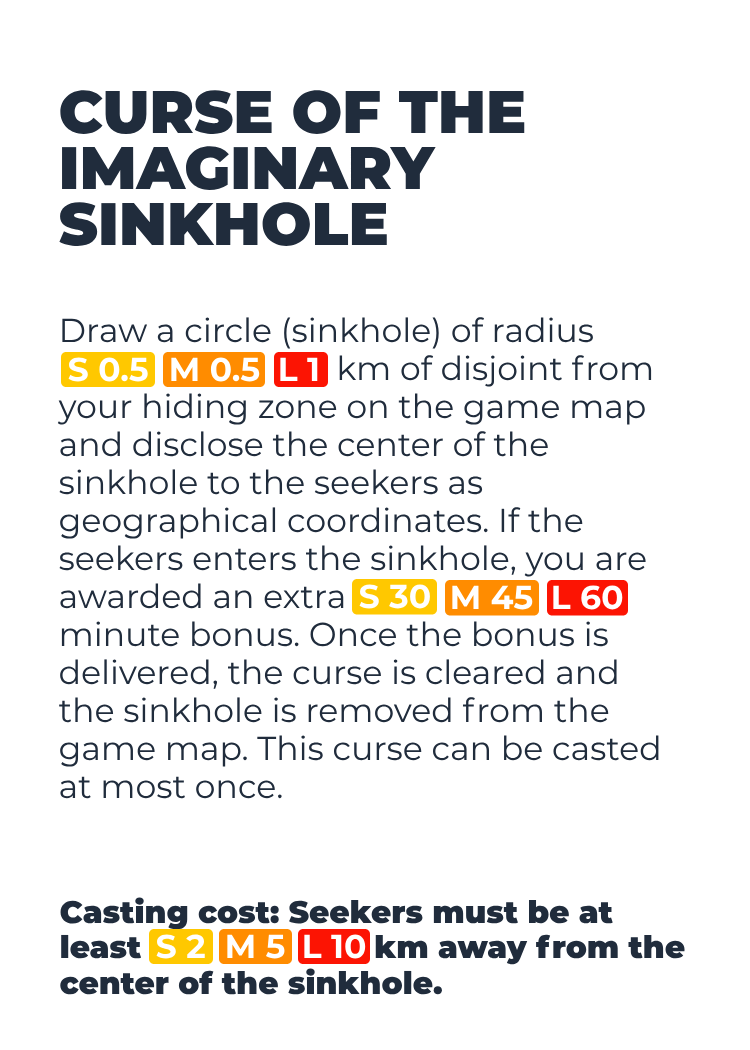
<style>
.page{position:relative;width:750px;height:1050px;background:#ffffff}
.page>*{position:absolute;margin:0}
.t1{font:59.8px/56.4px "Montserrat-Black";color:#202c3c}
.t2{font:33.1px/38px "Montserrat-Regular";color:#202c3c}
.t3{font:33.1px "Montserrat-Bold";color:#ffffff}
.t4{font:31.1px/35.6px "Montserrat-Black";color:#202c3c}
</style>
<div class="page">
<p class="t1" style="left:59px;top:90px;width:466px;height:156px">CURSE OF THE<br>IMAGINARY<br>SINKHOLE</p>
<p class="t2" style="left:57px;top:317px;width:602px;height:482px">Draw a circle (sinkhole) of radius<br>                                km of disjoint from<br>your hiding zone on the game map<br>and disclose the center of the<br>sinkhole to the seekers as<br>geographical coordinates. If the<br>seekers enters the sinkhole, you are <br>awarded an extra<br>minute bonus. Once the bonus is<br>delivered, the curse is cleared and<br>the sinkhole is removed from the<br>game map. This curse can be casted<br>at most once.</p>
<p class="t3" style="left:68px;top:357px;width:80px;height:25px">S 0.5</p>
<p class="t3" style="left:171px;top:357px;width:89px;height:25px">M 0.5</p>
<p class="t3" style="left:280px;top:357px;width:38px;height:25px">L 1</p>
<p class="t3" style="left:359px;top:584px;width:71px;height:25px">S 30</p>
<p class="t3" style="left:452px;top:585px;width:81px;height:25px">M 45</p>
<p class="t3" style="left:553px;top:585px;width:70px;height:25px">L 60</p>
<p class="t4" style="left:60px;top:897px;width:625px;height:98px">Casting cost: Seekers must be at<br>least                         km away from the<br>center of the sinkhole.</p>
<p class="t3" style="left:156px;top:934px;width:49px;height:25px">S 2</p>
<p class="t3" style="left:227px;top:934px;width:58px;height:25px">M 5</p>
<p class="t3" style="left:304px;top:934px;width:62px;height:25px">L 10</p>
</div>
